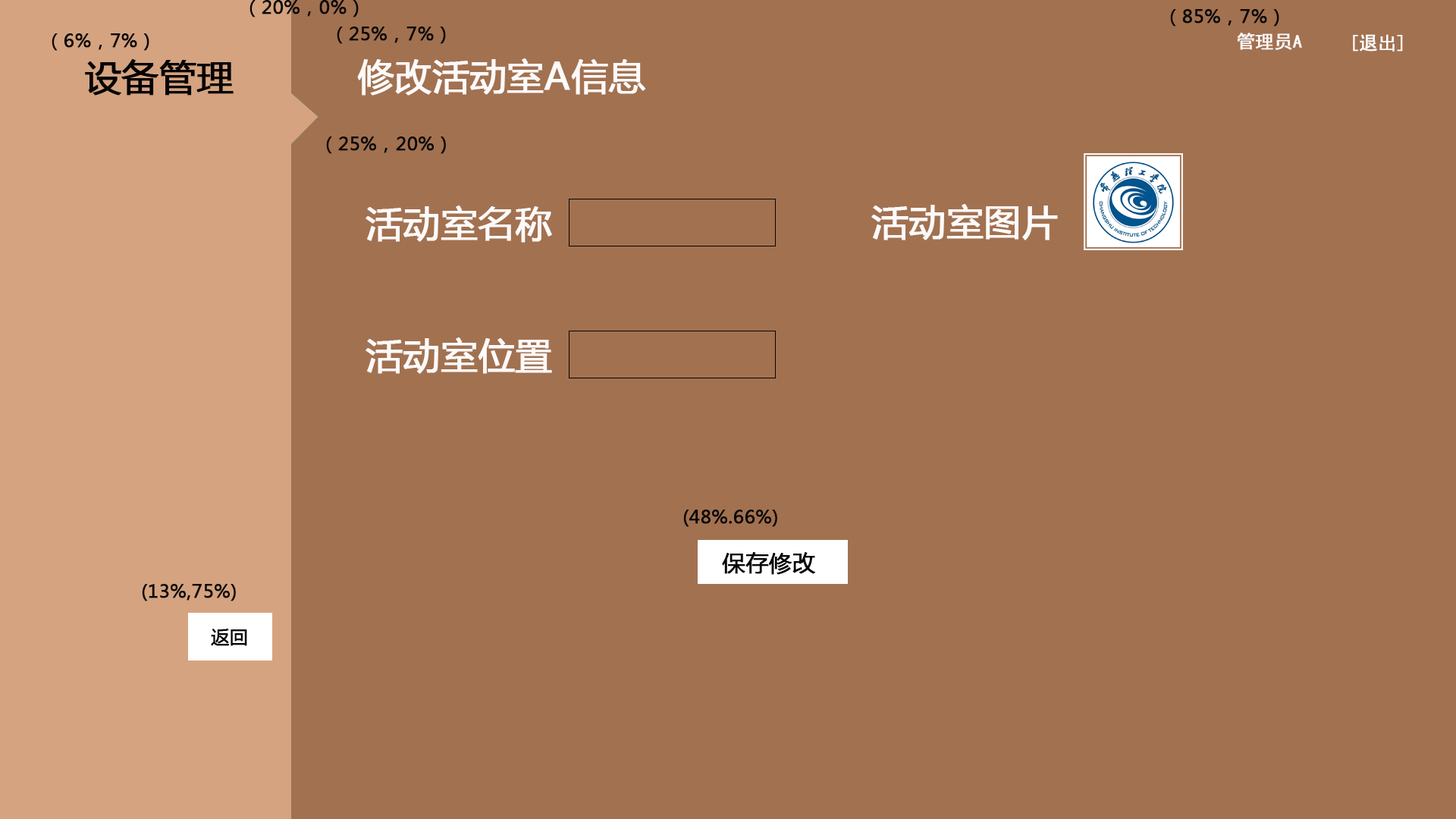
<style>
.page{position:relative;width:1456px;height:819px;background:#a27150}
.page>*{position:absolute;margin:0}
.t1{font:18.2px "MicrosoftYaHei";color:#090909;font-weight:bold}
.t2{font:18.2px "SimHei";color:#fcfafa;font-weight:bold}
.t3{font:36.4px "MicrosoftYaHei";color:#040404;font-weight:bold}
.t4{font:36.4px "MicrosoftYaHei";color:#fdfafa;font-weight:bold}
.t5{font:22.7px "MicrosoftYaHei";color:#040404;font-weight:bold}
.t6{font:18.2px "MicrosoftYaHei";color:#050505;font-weight:bold}
</style>
<div class="page">
<p class="t1" style="left:249px;top:0px;width:110px;height:17px">（20%，0%）</p>
<p class="t1" style="left:1170px;top:9px;width:109px;height:18px">（85%，7%）</p>
<p class="t1" style="left:337px;top:27px;width:109px;height:17px">（25%，7%）</p>
<p class="t1" style="left:52px;top:33px;width:97px;height:18px">（6%，7%）</p>
<p class="t2" style="left:1237px;top:33px;width:65px;height:17px">管理员A</p>
<p class="t2" style="left:1353px;top:34px;width:50px;height:18px">[退出]</p>
<p class="t3" style="left:85px;top:59px;width:149px;height:37px">设备管理</p>
<p class="t4" style="left:357px;top:58px;width:289px;height:38px">修改活动室A信息</p>
<p class="t1" style="left:326px;top:136px;width:120px;height:18px">（25%，20%）</p>
<p class="t4" style="left:366px;top:206px;width:186px;height:37px">活动室名称</p>
<p class="t4" style="left:871px;top:204px;width:187px;height:36px">活动室图片</p>
<p class="t4" style="left:366px;top:337px;width:186px;height:37px">活动室位置</p>
<p class="t1" style="left:683px;top:510px;width:94px;height:17px">(48%.66%)</p>
<p class="t5" style="left:722px;top:552px;width:93px;height:23px">保存修改</p>
<p class="t1" style="left:142px;top:584px;width:94px;height:17px">(13%,75%)</p>
<p class="t6" style="left:211px;top:629px;width:36px;height:17px">返回</p>
</div>
